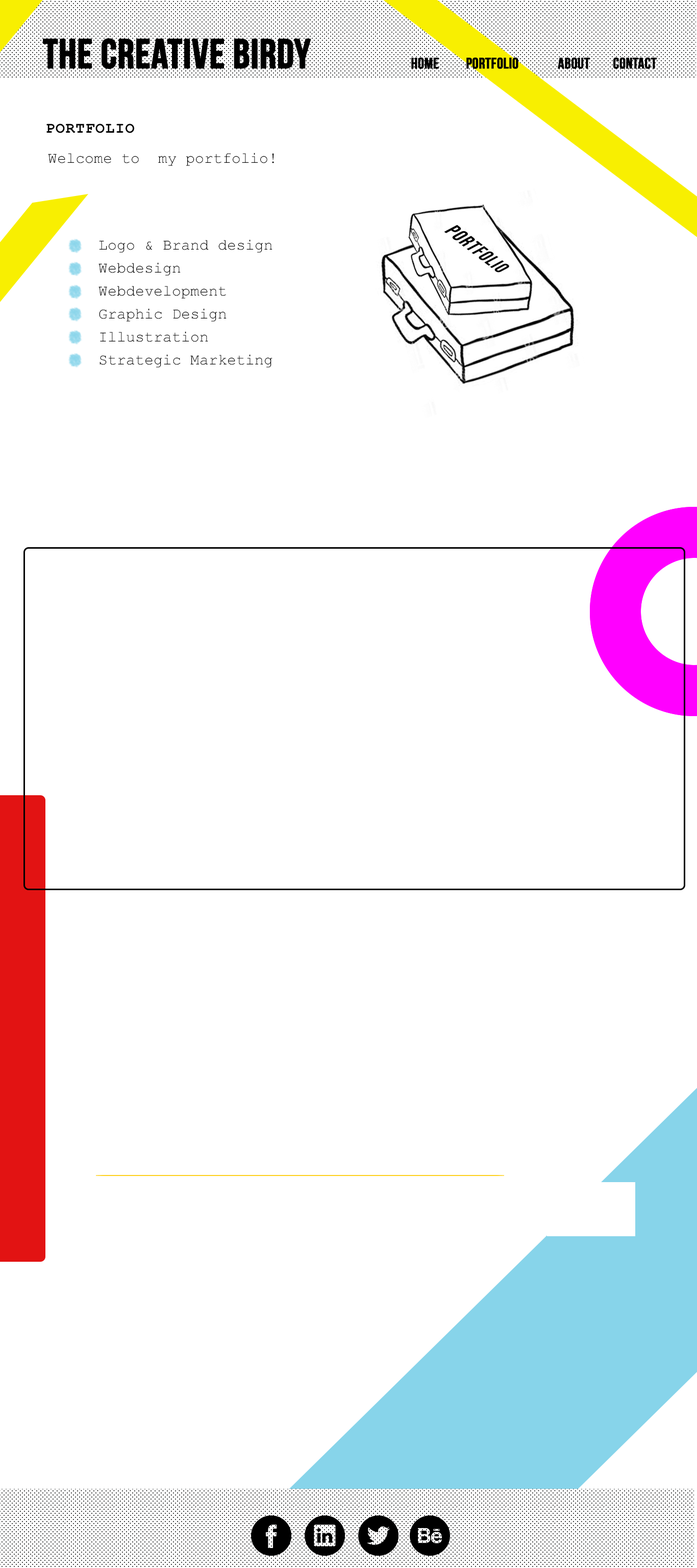
<style>
.page{position:relative;width:697px;height:1568px;background:#ffffff}
.page>*{position:absolute;margin:0}
.t1{font:40.8px "BebasNeue";color:#000000;font-weight:bold}
.t2{font:15.3px "BebasNeue";color:#000000;text-transform:uppercase;font-weight:bold}
.t3{font:15.3px "CourierNewPS-BoldMT";letter-spacing:0.05em;color:#000000}
.t4{font:15.3px "CourierNewPSMT";color:#000000}
.t5{font:15.3px/23px "CourierNewPSMT";color:#000000}
.t6{font:15.3px/23px "CourierNewPSMT";letter-spacing:0.05em;color:#000000}
</style>
<div class="page">
<p class="t1" style="left:43px;top:38px;width:268px;height:31px">THE CREATIVE BIRDY</p>
<p class="t2" style="left:411px;top:57px;width:246px;height:12px">home   PORTFOLIO   about   contact</p>
<p class="t3" style="left:46px;top:124px;width:88px;height:9px">PORTFOLIO</p>
<p class="t4" style="left:48px;top:153px;width:226px;height:13px">Welcome to  my portfolio!</p>
<p class="t5" style="left:99px;top:239px;width:174px;height:129px">Logo &amp; Brand design<br>Webdesign<br>Webdevelopment<br>Graphic Design<br>Illustration<br>Strategic Marketing<br><span class="t6"></span></p>
</div>
